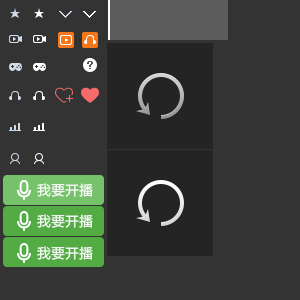
<style>
.page{position:relative;width:300px;height:300px;background:#333333}
.page>*{position:absolute;margin:0}
.t1{font:12px "SimSun";color:#555555;font-weight:bold}
.t2{font:14px "ZpixEX2";color:#ffffff;text-transform:uppercase}
</style>
<div class="page">
<p class="t1" style="left:87px;top:61px;width:6px;height:8px">?</p>
<p class="t2" style="left:37px;top:183px;width:56px;height:14px">我要开播</p>
<p class="t2" style="left:37px;top:214px;width:56px;height:14px">我要开播</p>
<p class="t2" style="left:37px;top:246px;width:56px;height:14px">我要开播</p>
</div>
